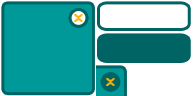
<style>
.page{position:relative;width:193px;height:96px;background:#009999}
.page>*{position:absolute;margin:0}
.t1{font:18.7px "8514oem";color:#ffb300;scale:1.16 1}
</style>
<div class="page">
<p class="t1" style="left:74px;top:14px;width:9px;height:8px">x</p>
<p class="t1" style="left:106px;top:78px;width:9px;height:8px">x</p>
</div>
